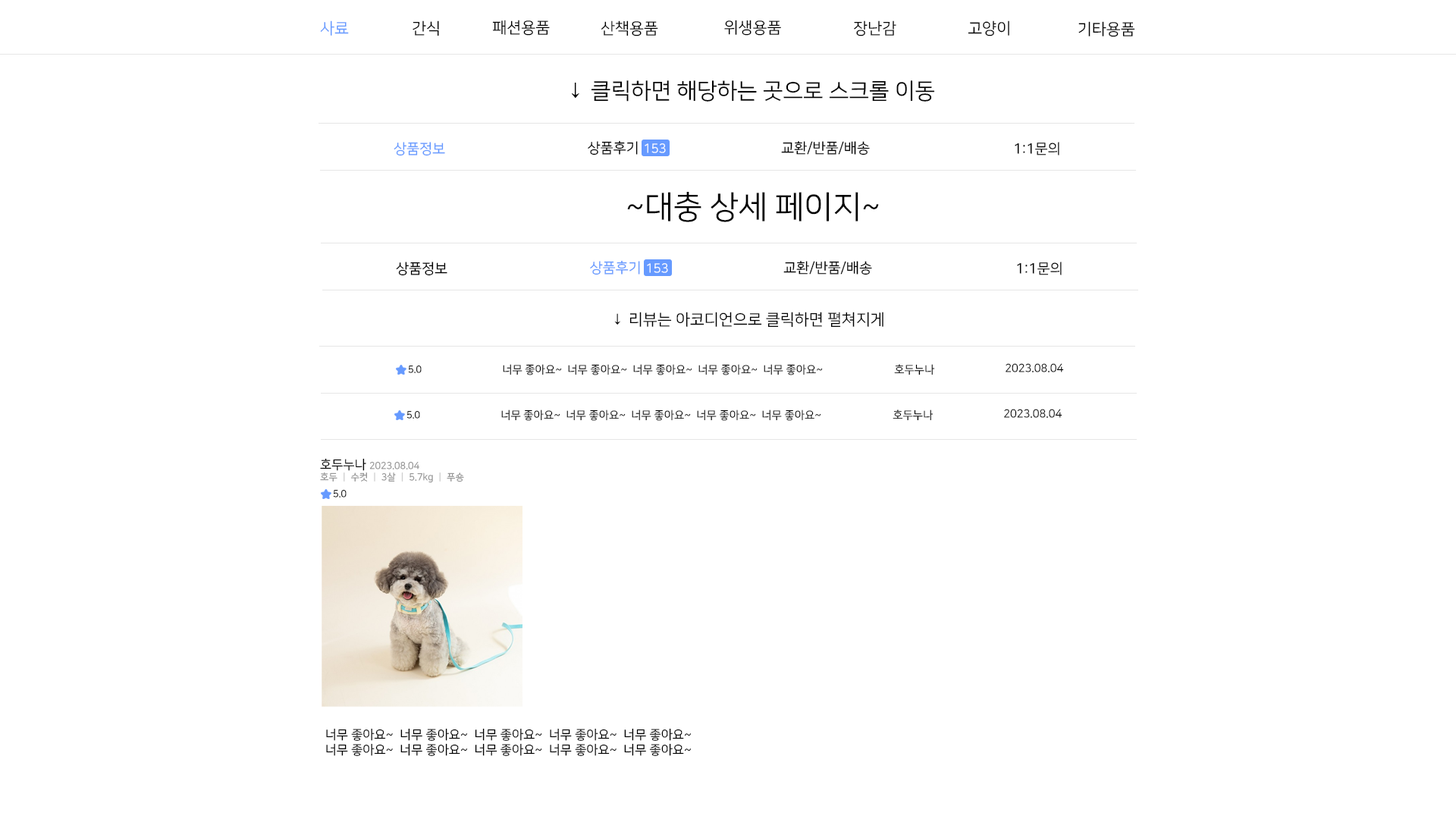
<style>
.page{position:relative;width:1456px;height:819px;background:#ffffff}
.page>*{position:absolute;margin:0}
.t1{font:15.8px "NanumSquareR";color:#669aff}
.t2{font:15.8px "NanumSquareR";color:#000000}
.t3{font:22.1px "NanumSquareR";color:#000000}
.t4{font:14.2px "NanumSquareR";color:#669aff}
.t5{font:14.2px "NanumSquareR";color:#000000}
.t6{font:12.6px "NanumSquareR";color:#ffffff}
.t7{font:31.6px "NanumSquareR";color:#000000}
.t8{font:9.5px "NanumSquareR"}
.t9{font:11.1px "NanumSquareR";color:#000000}
.t10{font:9.5px "NanumSquareR";color:#8f8f8f}
.t11{font:12.6px "NanumSquareR";color:#000000}
.t12{font:9.5px "NanumSquareR";color:#d0d0d0}
</style>
<div class="page">
<p class="t1" style="left:320px;top:20px;width:29px;height:16px">사료</p>
<p class="t2" style="left:413px;top:20px;width:26px;height:16px">간식</p>
<p class="t2" style="left:492px;top:20px;width:58px;height:16px">패션용품</p>
<p class="t2" style="left:601px;top:20px;width:57px;height:16px">산책용품</p>
<p class="t2" style="left:724px;top:20px;width:57px;height:16px">위생용품</p>
<p class="t2" style="left:854px;top:20px;width:42px;height:16px">장난감</p>
<p class="t2" style="left:968px;top:20px;width:41px;height:16px">고양이</p>
<p class="t2" style="left:1078px;top:21px;width:57px;height:16px">기타용품</p>
<p class="t3" style="left:571px;top:80px;width:364px;height:22px">↓ 클릭하면 해당하는 곳으로 스크롤 이동</p>
<p class="t4" style="left:394px;top:142px;width:51px;height:14px">상품정보</p>
<p class="t5" style="left:588px;top:140px;width:50px;height:15px">상품후기</p>
<p class="t6" style="left:645px;top:143px;width:21px;height:10px">153</p>
<p class="t5" style="left:781px;top:141px;width:89px;height:14px">교환/반품/배송</p>
<p class="t5" style="left:1015px;top:142px;width:44px;height:13px">1:1문의</p>
<p class="t7" style="left:627px;top:192px;width:252px;height:30px">~대충 상세 페이지~</p>
<p class="t5" style="left:396px;top:262px;width:51px;height:14px">상품정보</p>
<p class="t4" style="left:590px;top:260px;width:50px;height:15px">상품후기</p>
<p class="t6" style="left:647px;top:263px;width:21px;height:10px">153</p>
<p class="t5" style="left:783px;top:261px;width:89px;height:14px">교환/반품/배송</p>
<p class="t5" style="left:1017px;top:262px;width:45px;height:13px">1:1문의</p>
<p class="t2" style="left:614px;top:312px;width:269px;height:16px">↓ 리뷰는 아코디언으로 클릭하면 펼쳐지게</p>
<p class="t8" style="left:408px;top:366px;width:14px;height:7px">5.0</p>
<p class="t9" style="left:503px;top:364px;width:320px;height:11px">너무 좋아요~  너무 좋아요~  너무 좋아요~  너무 좋아요~  너무 좋아요~</p>
<p class="t9" style="left:894px;top:364px;width:41px;height:11px">호두누나</p>
<p class="t9" style="left:1006px;top:363px;width:58px;height:9px">2023.08.04</p>
<p class="t8" style="left:406px;top:411px;width:14px;height:8px">5.0</p>
<p class="t9" style="left:501px;top:409px;width:320px;height:12px">너무 좋아요~  너무 좋아요~  너무 좋아요~  너무 좋아요~  너무 좋아요~</p>
<p class="t9" style="left:893px;top:409px;width:40px;height:12px">호두누나</p>
<p class="t9" style="left:1004px;top:409px;width:58px;height:9px">2023.08.04</p>
<p class="t10" style="left:320px;top:458px;width:144px;height:25px"><span class="t11">호두누나 </span>2023.08.04<br>호두 <span class="t12">ㅣ</span> 수컷 <span class="t12">ㅣ</span> 3살 <span class="t12">ㅣ</span> 5.7kg <span class="t12">ㅣ</span> 푸숑</p>
<p class="t8" style="left:333px;top:490px;width:14px;height:7px">5.0</p>
<p class="t11" style="left:326px;top:728px;width:366px;height:28px">너무 좋아요~  너무 좋아요~  너무 좋아요~  너무 좋아요~  너무 좋아요~ <br>너무 좋아요~  너무 좋아요~  너무 좋아요~  너무 좋아요~  너무 좋아요~</p>
</div>
